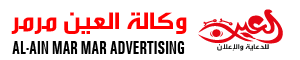
<style>
.page{position:relative;width:300px;height:60px;background:#ffffff}
.page>*{position:absolute;margin:0}
.t1{font:25.4px "GESSTVBold-Bold";color:#ff0000;scale:1.17 1}
.t2{font:18.7px "Univers-Condensed-Bold";color:#000000;scale:0.76 1}
</style>
<div class="page">
<p class="t1" style="left:11px;top:12px;width:176px;height:22px">وكالة العين مرمر</p>
<p class="t2" style="left:12px;top:41px;width:173px;height:13px">AL-AIN MAR MAR ADVERTISING</p>
</div>
